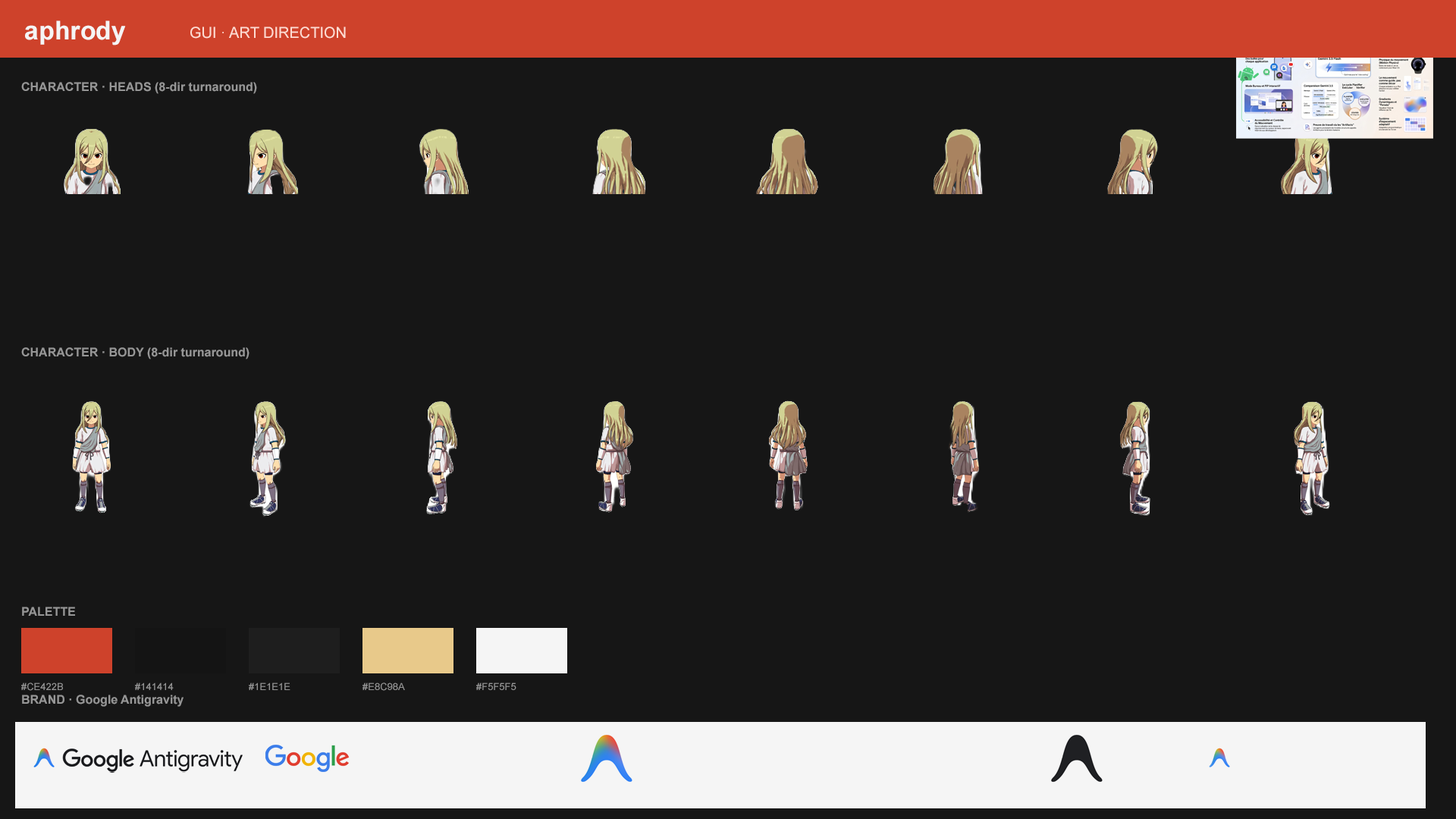
<style>
.page{position:relative;width:1456px;height:819px;background:#161616}
.page>*{position:absolute;margin:0}
.t1{font:25.8px "Arial-BoldMT";color:#f5f5f5}
.t2{font:15.2px "ArialMT";color:#ffdcd2}
.t3{font:12.1px "Arial-BoldMT";color:#969696}
.t4{font:9.9px "ArialMT";color:#969696}
</style>
<div class="page">
<p class="t1" style="left:25px;top:20px;width:101px;height:25px">aphrody</p>
<p class="t2" style="left:190px;top:27px;width:156px;height:12px">GUI · ART DIRECTION</p>
<p class="t3" style="left:21px;top:82px;width:236px;height:12px">CHARACTER · HEADS (8-dir turnaround)</p>
<p class="t3" style="left:21px;top:347px;width:228px;height:12px">CHARACTER · BODY (8-dir turnaround)</p>
<p class="t3" style="left:22px;top:607px;width:53px;height:9px">PALETTE</p>
<p class="t4" style="left:21px;top:682px;width:42px;height:9px">#CE422B</p>
<p class="t4" style="left:135px;top:682px;width:39px;height:8px">#141414</p>
<p class="t4" style="left:249px;top:682px;width:41px;height:8px">#1E1E1E</p>
<p class="t4" style="left:362px;top:682px;width:43px;height:9px">#E8C98A</p>
<p class="t4" style="left:476px;top:682px;width:40px;height:8px">#F5F5F5</p>
<p class="t3" style="left:22px;top:695px;width:162px;height:12px">BRAND · Google Antigravity</p>
</div>
